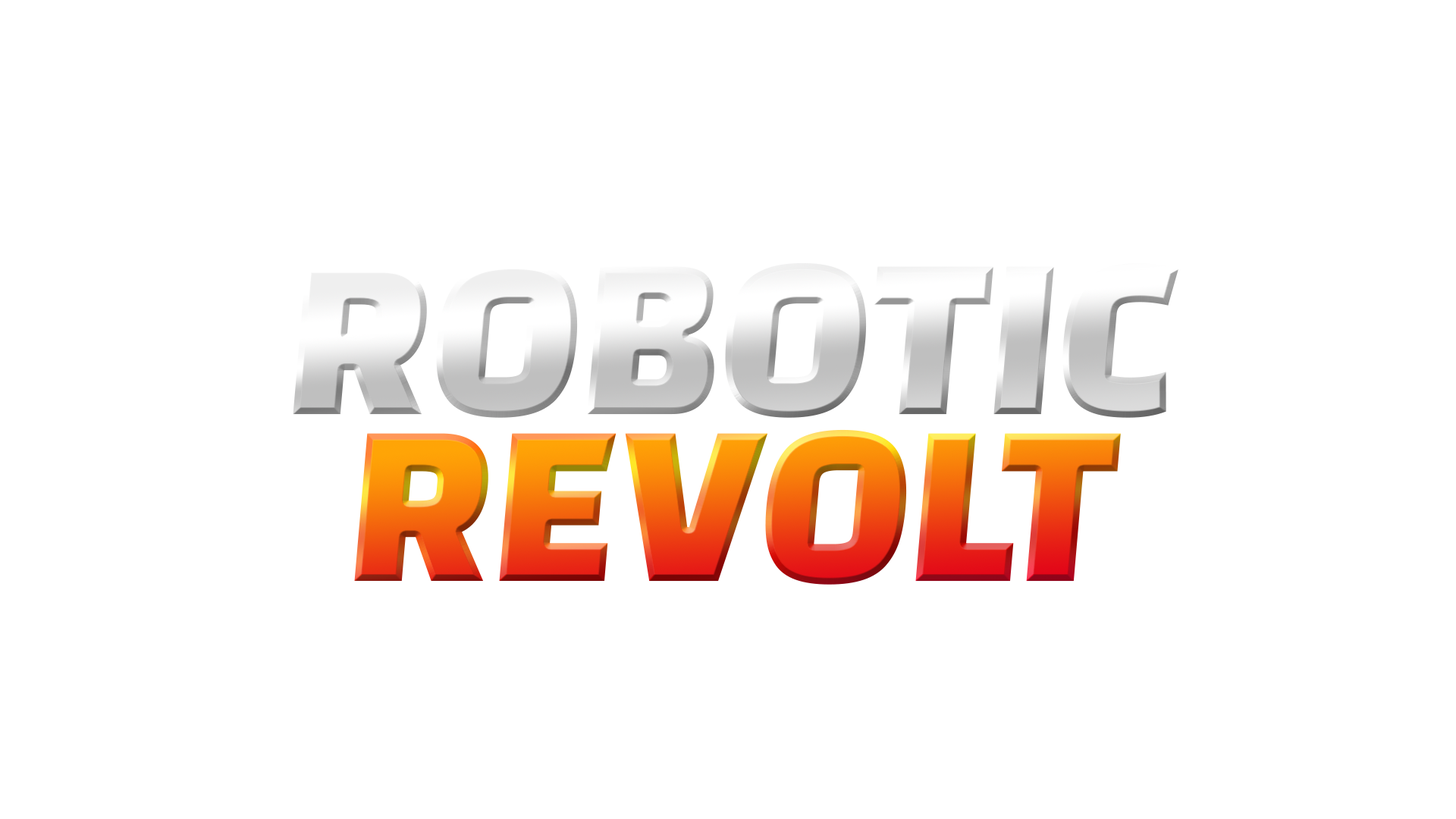
<style>
.page{position:relative;width:1456px;height:819px;background:#ffffff}
.page>*{position:absolute;margin:0}
.t1{font:237px "ChangaOne"}
</style>
<div class="page">
<p class="t1" style="left:293px;top:262px;width:885px;height:156px">ROBOTIC</p>
<p class="t1" style="left:354px;top:429px;width:767px;height:156px">REVOLT</p>
</div>
